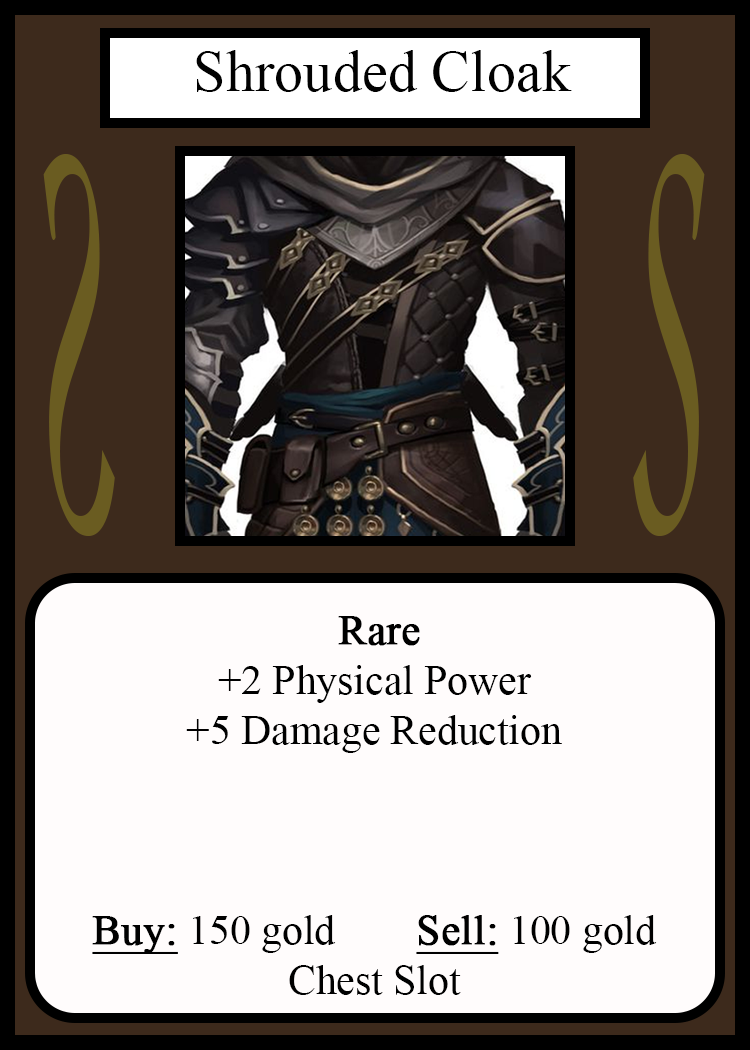
<style>
.page{position:relative;width:750px;height:1050px;background:#fffcfc}
.page>*{position:absolute;margin:0}
.t1{font:58.3px "TimesNewRomanPSMT";color:#010101}
.t2{font:548.5px "Apple-Chancery";color:#6a5c21;scale:0.27 1}
.t3{font:548.2px "Apple-Chancery";color:#6a5c21;scale:0.27 1}
.t4{font:41.7px "TimesNewRomanPSMT";color:#000000}
.t5{font:41.7px "TimesNewRomanPSMT";color:#000000;font-weight:bold}
.t6{font:41.7px "TimesNewRomanPSMT";color:#000000;font-weight:bold;text-decoration:underline}
</style>
<div class="page">
<p class="t1" style="left:196px;top:50px;width:376px;height:42px">Shrouded Cloak</p>
<p class="t2" style="left:43px;top:154px;width:72px;height:382px;rotate:180deg">S</p>
<p class="t3" style="left:633px;top:154px;width:72px;height:382px">S</p>
<p class="t4" style="left:92px;top:616px;width:565px;height:379px;text-align:center"><span class="t5">Rare<br></span>+2 Physical Power<br>+5 Damage Reduction<br><br><br><br><span class="t6">Buy:</span> 150 gold   <span class="t6">Sell:</span> 100 gold<br>Chest Slot</p>
</div>
